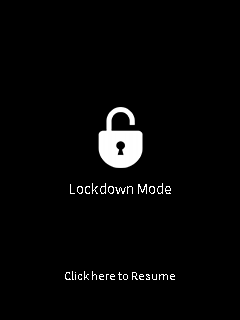
<style>
.page{position:relative;width:240px;height:320px;background:#000000}
.page>*{position:absolute;margin:0}
.t1{font:14px "TaipeiSansTCBeta-Regular";color:#ffffff}
.t2{font:11px "TaipeiSansTCBeta-Regular";color:#ffffff}
</style>
<div class="page">
<p class="t1" style="left:70px;top:183px;width:101px;height:11px">Lockdown Mode</p>
<p class="t2" style="left:65px;top:271px;width:110px;height:9px">Click here to Resume</p>
</div>
